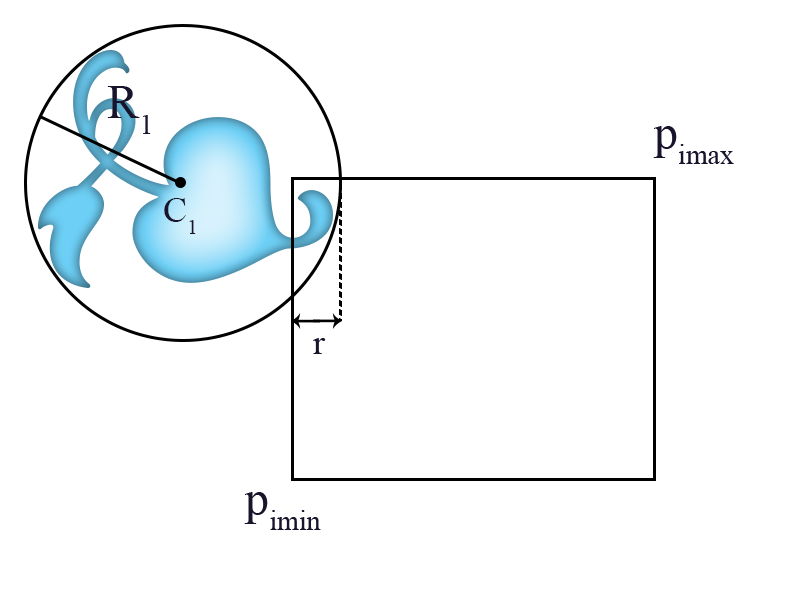
<style>
.page{position:relative;width:800px;height:600px;background:#ffffff}
.page>*{position:absolute;margin:0}
.t1{font:48px "TimesNewRomanPSMT";color:#19132b}
.t2{font:36px "TimesNewRomanPSMT";color:#19132b}
</style>
<div class="page">
<p class="t1" style="left:107px;top:86px;width:44px;height:48px">R1</p>
<p class="t1" style="left:653px;top:126px;width:81px;height:38px">pimax</p>
<p class="t2" style="left:164px;top:198px;width:32px;height:36px">C1</p>
<p class="t2" style="left:313px;top:338px;width:13px;height:16px">r</p>
<p class="t1" style="left:244px;top:492px;width:77px;height:38px">pimin</p>
</div>
